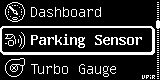
<style>
.page{position:relative;width:160px;height:80px;background:#000000}
.page>*{position:absolute;margin:0}
.t1{font:16px "Greybeard17px";letter-spacing:-0.025em;color:#ffffff}
.t2{font:16px "Greybeard17pxBold";letter-spacing:-0.025em;color:#ffffff}
</style>
<div class="page">
<p class="t1" style="left:31px;top:7px;width:70px;height:10px">Dashboard</p>
<p class="t2" style="left:31px;top:34px;width:111px;height:14px">Parking Sensor</p>
<p class="t1" style="left:31px;top:64px;width:85px;height:13px">Turbo Gauge</p>
</div>
